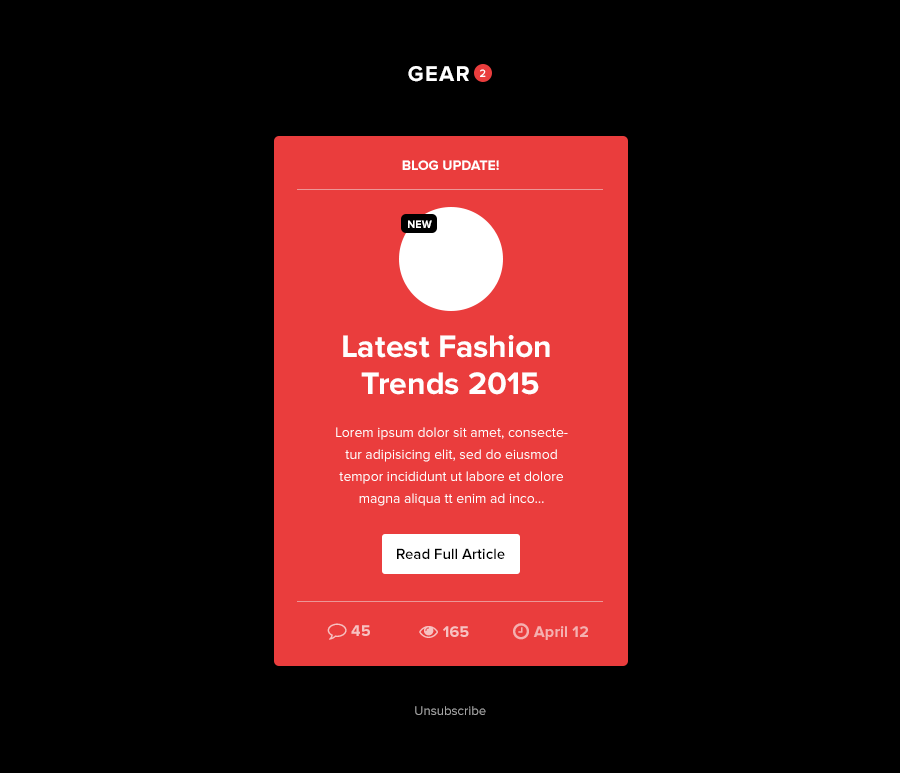
<style>
.page{position:relative;width:900px;height:773px;background:#000000}
.page>*{position:absolute;margin:0}
.t1{font:22px "ProximaNova-Bold";letter-spacing:0.06em;color:#ffffff;text-transform:uppercase}
.t2{font:11px "ProximaNova-Semibold";color:#fffefe}
.t3{font:14px "ProximaNova-Bold";color:#ffffff;text-transform:uppercase}
.t4{font:11px "ProximaNova-Bold";color:#ffffff;text-transform:uppercase}
.t5{font:32.1px/32.1px "ProximaNova-Bold";color:#fffefe}
.t6{font:14px/22px "ProximaNova-Regular";color:#ffffff}
.t7{font:15px "ProximaNova-Semibold";color:#000000}
.t8{font:13.1px "ProximaNova-Regular";color:#a3a3a3}
</style>
<div class="page">
<p class="t1" style="left:408px;top:66px;width:61px;height:16px">Gear</p>
<p class="t2" style="left:480px;top:69px;width:6px;height:8px">2</p>
<p class="t3" style="left:402px;top:160px;width:97px;height:10px">blog update!</p>
<p class="t4" style="left:408px;top:220px;width:24px;height:8px">NEW</p>
<p class="t5" style="left:343px;top:335px;width:207px;height:60px;text-align:center">Latest Fashion <br>Trends 2015</p>
<p class="t6" style="left:336px;top:427px;width:232px;height:79px;text-align:center">Lorem ipsum dolor sit amet, consectetur adipisicing elit, sed do eiusmod tempor incididunt ut labore et dolore magna aliqua tt enim ad inco...</p>
<p class="t7" style="left:397px;top:548px;width:108px;height:11px">Read Full Article</p>
<p class="t8" style="left:415px;top:706px;width:71px;height:9px">Unsubscribe</p>
</div>
